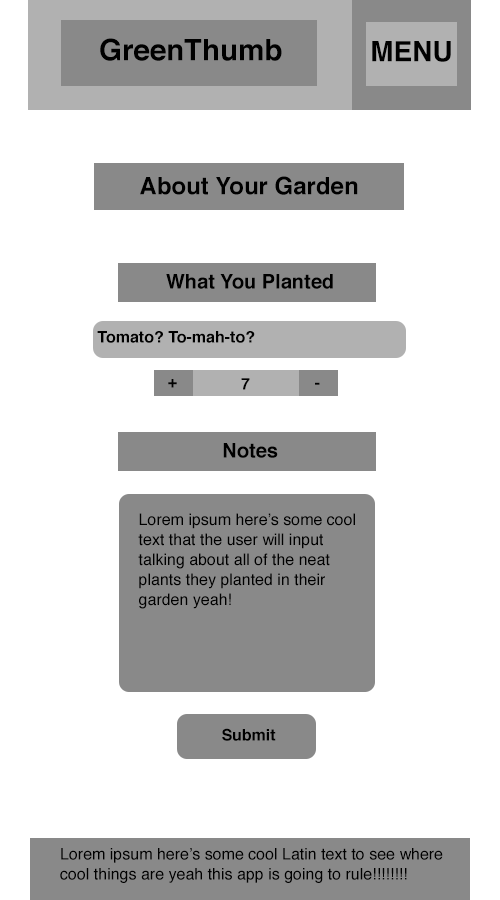
<style>
.page{position:relative;width:500px;height:900px;background:#ffffff}
.page>*{position:absolute;margin:0}
.t1{font:29.5px "Helvetica-Bold";color:#000000}
.t2{font:28px "Helvetica-Bold";color:#000000}
.t3{font:24px "Helvetica-Bold";color:#000000}
.t4{font:20px "Helvetica-Bold";color:#000000}
.t5{font:16px "Helvetica-Bold";color:#000000}
.t6{font:16px "Helvetica-Bold";color:#010101}
.t7{font:16px/20px "Helvetica";color:#000000}
</style>
<div class="page">
<p class="t1" style="left:100px;top:38px;width:182px;height:23px">GreenThumb</p>
<p class="t2" style="left:372px;top:41px;width:79px;height:21px">MENU</p>
<p class="t3" style="left:140px;top:176px;width:218px;height:19px">About Your Garden</p>
<p class="t4" style="left:166px;top:274px;width:167px;height:15px">What You Planted</p>
<p class="t5" style="left:97px;top:331px;width:158px;height:12px">Tomato? To-mah-to?</p>
<p class="t6" style="left:168px;top:379px;width:9px;height:9px">+</p>
<p class="t5" style="left:241px;top:378px;width:9px;height:12px">7</p>
<p class="t5" style="left:315px;top:382px;width:5px;height:3px">-</p>
<p class="t4" style="left:223px;top:443px;width:55px;height:15px">Notes</p>
<p class="t7" style="left:138px;top:513px;width:217px;height:96px">Lorem ipsum here’s some cool text that the user will input talking about all of the neat plants they planted in their garden yeah!</p>
<p class="t5" style="left:222px;top:728px;width:54px;height:13px">Submit</p>
<p class="t7" style="left:60px;top:848px;width:383px;height:35px">Lorem ipsum here’s some cool Latin text to see where cool things are yeah this app is going to rule!!!!!!!!</p>
</div>
